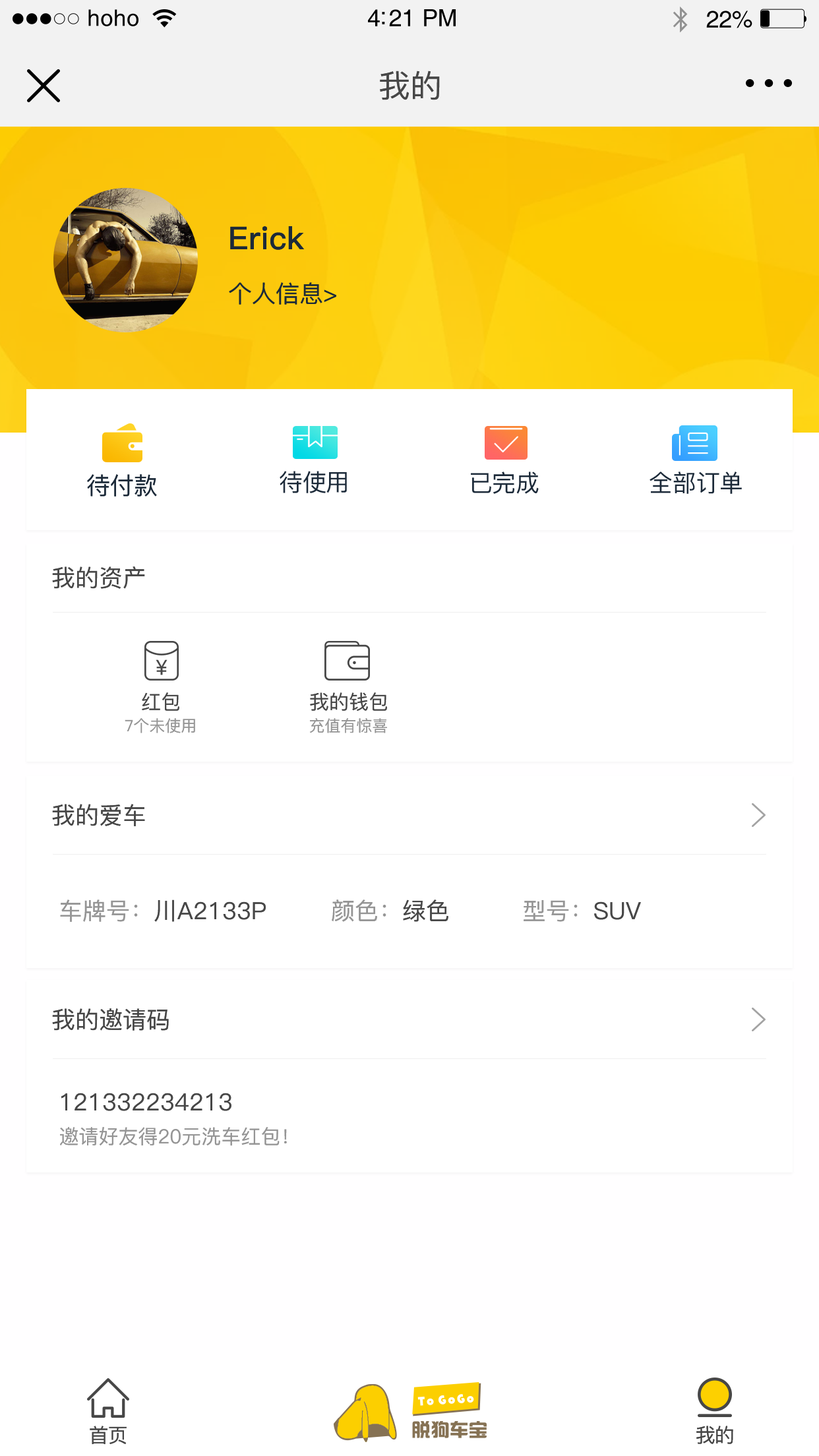
<style>
.page{position:relative;width:819px;height:1456px;background:#ffffff}
.page>*{position:absolute;margin:0}
.t1{font:22.8px "Helvetica";letter-spacing:0.02em;color:#000000}
.t2{font:23.8px "Helvetica";letter-spacing:-0.02em;color:#000000}
.t3{font:31.7px "PingFang-SC-Medium";color:#474747}
.t4{font:31.7px "PingFang-SC-Bold";color:#1c2a39}
.t5{font:23.7px "PingFang-SC-Medium";color:#1c2a39}
.t6{font:23.8px "PingFang-SC-Medium";color:#1c2a39}
.t7{font:23.7px "PingFang-SC-Medium";color:#474747}
.t8{font:19.8px "PingFang-SC-Medium";color:#474747}
.t9{font:15.8px "PingFang-SC-Medium";color:#959595}
.t10{font:23.7px "PingFang-SC-Medium";color:#959595}
.t11{font:19.8px "PingFang-SC-Medium";color:#959595}
.t12{font:19.8px "PingFang-SC-Medium";letter-spacing:-0.03em;color:#474747}
</style>
<div class="page">
<p class="t1" style="left:88px;top:9px;width:50px;height:17px">hoho</p>
<p class="t2" style="left:368px;top:9px;width:88px;height:17px">4:21 PM</p>
<p class="t2" style="left:706px;top:11px;width:46px;height:17px">22%</p>
<p class="t3" style="left:380px;top:71px;width:60px;height:29px">我的</p>
<p class="t4" style="left:230px;top:226px;width:75px;height:24px">Erick</p>
<p class="t5" style="left:229px;top:282px;width:107px;height:23px">个人信息&gt;</p>
<p class="t6" style="left:280px;top:471px;width:67px;height:22px">待使用</p>
<p class="t6" style="left:471px;top:471px;width:68px;height:23px">已完成</p>
<p class="t6" style="left:650px;top:471px;width:92px;height:23px">全部订单</p>
<p class="t5" style="left:87px;top:474px;width:70px;height:23px">待付款</p>
<p class="t7" style="left:52px;top:566px;width:93px;height:23px">我的资产</p>
<p class="t8" style="left:142px;top:692px;width:37px;height:19px">红包</p>
<p class="t8" style="left:310px;top:692px;width:77px;height:19px">我的钱包</p>
<p class="t9" style="left:125px;top:718px;width:70px;height:15px">7个未使用</p>
<p class="t9" style="left:309px;top:718px;width:78px;height:15px">充值有惊喜</p>
<p class="t7" style="left:52px;top:804px;width:93px;height:22px">我的爱车</p>
<p class="t7" style="left:60px;top:899px;width:206px;height:23px"><span class="t10">车牌号：</span>川A2133P</p>
<p class="t10" style="left:332px;top:899px;width:116px;height:23px">颜色：<span class="t7">绿色</span></p>
<p class="t10" style="left:524px;top:900px;width:117px;height:22px">型号：<span class="t7">SUV</span></p>
<p class="t7" style="left:52px;top:1008px;width:117px;height:23px">我的邀请码</p>
<p class="t7" style="left:61px;top:1093px;width:170px;height:18px">121332234213</p>
<p class="t11" style="left:60px;top:1127px;width:227px;height:19px">邀请好友得20元洗车红包！</p>
<p class="t12" style="left:90px;top:1426px;width:37px;height:18px">首页</p>
<p class="t12" style="left:696px;top:1426px;width:37px;height:18px">我的</p>
<p class="t12" style="left:696px;top:1426px;width:37px;height:18px">我的</p>
</div>
